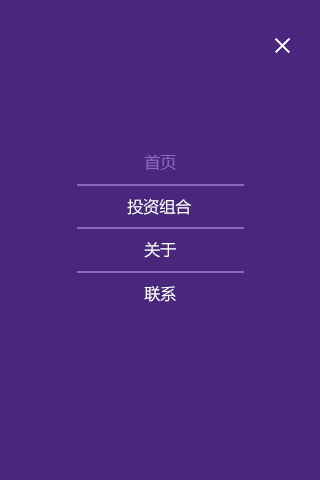
<style>
.page{position:relative;width:320px;height:480px;background:#49277d}
.page>*{position:absolute;margin:0}
.t1{font:16px "MicrosoftYaHei";color:#8b69c2}
.t2{font:16px "MicrosoftYaHei";color:#ffffff}
</style>
<div class="page">
<p class="t1" style="left:144px;top:154px;width:32px;height:17px">首页</p>
<p class="t2" style="left:127px;top:198px;width:64px;height:17px">投资组合</p>
<p class="t2" style="left:144px;top:242px;width:32px;height:16px">关于</p>
<p class="t2" style="left:144px;top:286px;width:32px;height:16px">联系</p>
</div>
